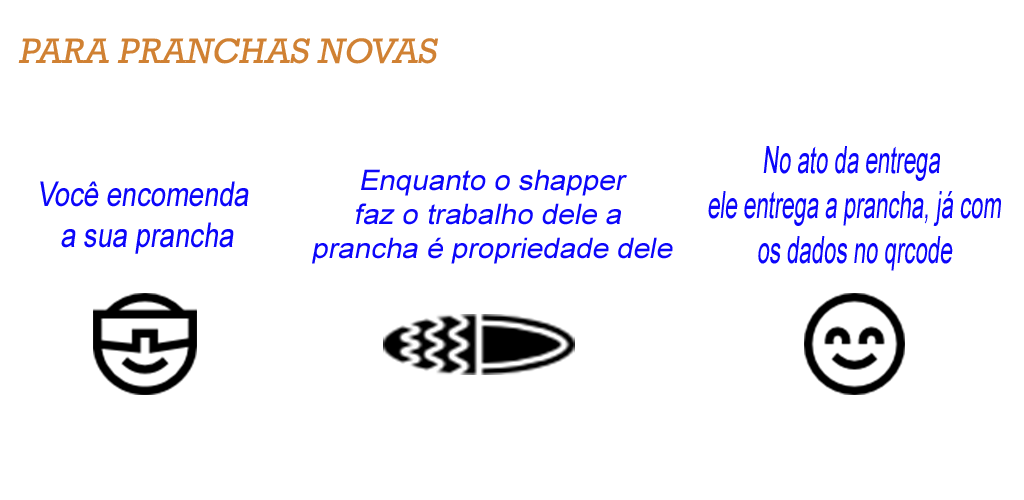
<style>
.page{position:relative;width:1024px;height:500px;background:#ffffff}
.page>*{position:absolute;margin:0}
.t1{font:36px "Rockwell";color:#d08133;text-transform:uppercase;font-style:italic}
.t2{font:37.4px "ArialMT";color:#0c06fa;font-style:italic;scale:0.59 1}
.t3{font:28.2px "ArialMT";color:#0c06fa;font-style:italic;scale:1.05 1}
.t4{font:34px "ArialMT";color:#0c06fa;font-style:italic;scale:0.8 1}
</style>
<div class="page">
<p class="t1" style="left:18px;top:38px;width:420px;height:26px">Para pranchas novas</p>
<p class="t2" style="left:708px;top:146px;width:293px;height:125px;text-align:center">No ato da entrega <br>ele entrega a prancha, já com<br>os dados no qrcode</p>
<p class="t3" style="left:312px;top:169px;width:361px;height:95px;text-align:center">Enquanto o shapper<br>faz o trabalho dele a <br>prancha é propriedade dele</p>
<p class="t4" style="left:40px;top:181px;width:209px;height:73px;text-align:center">Você encomenda <br>a sua prancha</p>
</div>
